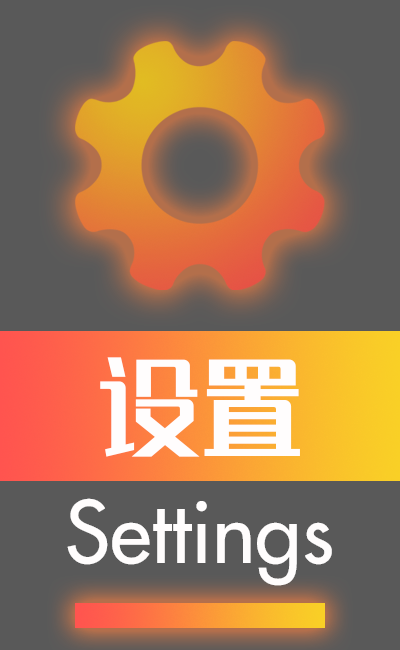
<style>
.page{position:relative;width:400px;height:650px;background:#595959}
.page>*{position:absolute;margin:0}
.t1{font:104.2px "REEJIZhenyanGB20GX-Medium";color:#fffdfd}
.t2{font:83.3px "Futura-Medium";color:#fffdfd}
</style>
<div class="page">
<p class="t1" style="left:100px;top:357px;width:200px;height:100px">设置</p>
<p class="t2" style="left:67px;top:498px;width:265px;height:88px">Settings</p>
</div>
